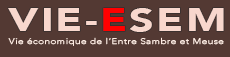
<style>
.page{position:relative;width:230px;height:57px;background:#533933}
.page>*{position:absolute;margin:0}
.t1{font:32px "Avenir-Black";letter-spacing:0.05em;color:#f8d7cd;scale:1.35 1}
.t2{font:32px "Avenir-Black";letter-spacing:0.05em;color:#ff0000;scale:1.35 1}
.t3{font:8px "Avenir-Light";letter-spacing:0.05em;color:#ffede4;scale:1.23 1}
</style>
<div class="page">
<p class="t1" style="left:8px;top:8px;width:216px;height:24px">VIE-<span class="t2">E</span>SEM</p>
<p class="t3" style="left:8px;top:37px;width:216px;height:9px">Vie économique de l’Entre Sambre et Meuse</p>
</div>
